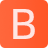
<style>
.page{position:relative;width:48px;height:48px}
.page>*{position:absolute;margin:0}
.t1{font:43.4px "AlibabaSansThai";letter-spacing:0.05em;color:#ffe5e1;scale:1.08 1}
</style>
<div class="page">
<p class="t1" style="left:13px;top:9px;width:22px;height:30px">B</p>
</div>
